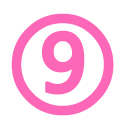
<style>
.page{position:relative;width:128px;height:128px;background:#ffffff}
.page>*{position:absolute;margin:0}
.t1{font:106.7px "MicrosoftYaHei";color:#fc67b7;font-weight:bold}
</style>
<div class="page">
<p class="t1" style="left:11px;top:13px;width:103px;height:103px">⑨</p>
</div>
